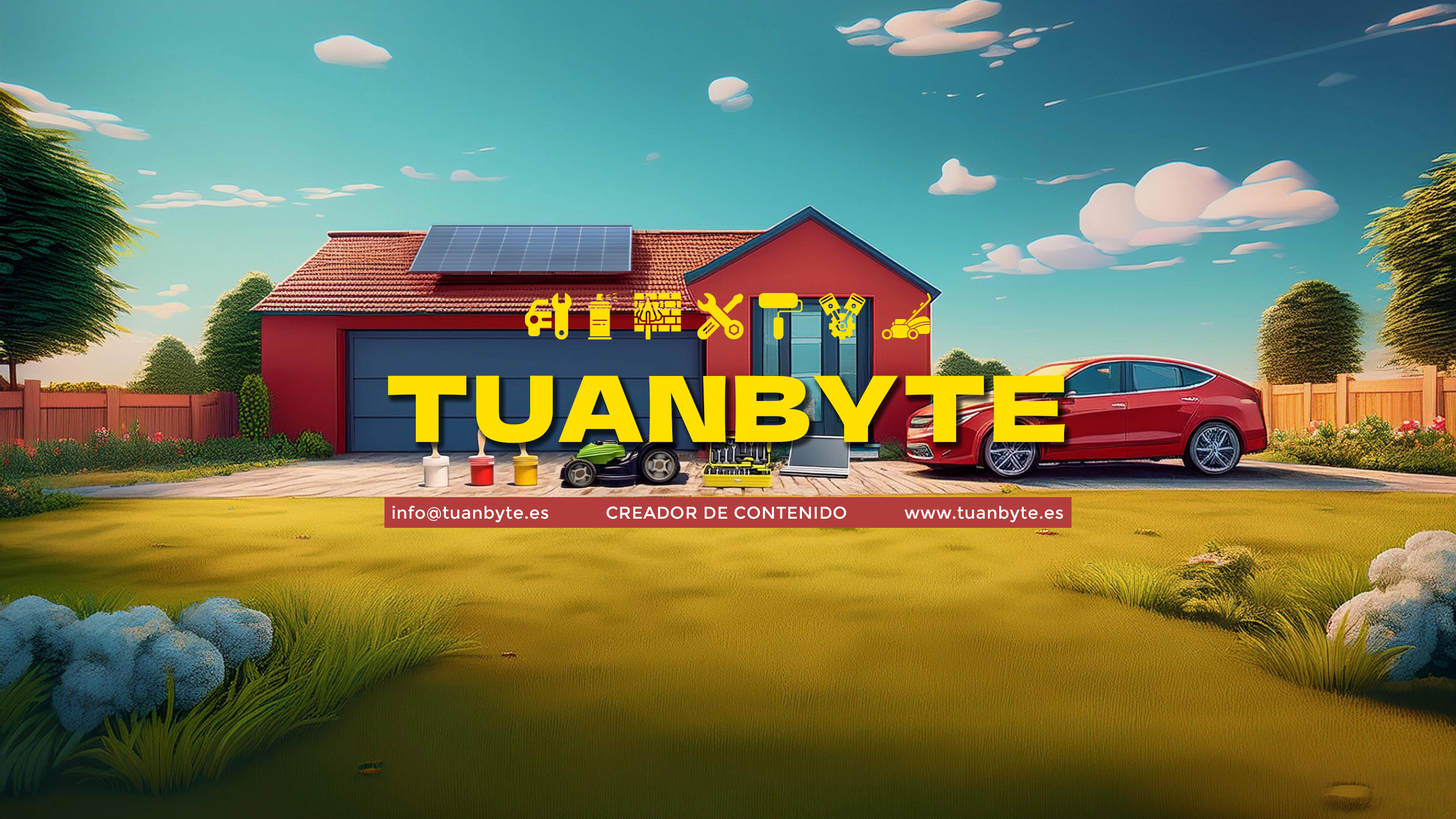
<style>
.page{position:relative;width:1456px;height:819px}
.page>*{position:absolute;margin:0}
.t1{font:91px "DelaGothicOne-Regular";letter-spacing:0.028em;color:#ffe000}
.t2{font:17.1px "Montserrat-Regular";letter-spacing:0.028em;color:#ffffff}
</style>
<div class="page">
<p class="t1" style="left:388px;top:375px;width:677px;height:68px">TUANBYTE</p>
<p class="t2" style="left:392px;top:506px;width:156px;height:17px">info@tuanbyte.es</p>
<p class="t2" style="left:606px;top:506px;width:240px;height:13px">CREADOR DE CONTENIDO</p>
<p class="t2" style="left:904px;top:506px;width:159px;height:17px">www.tuanbyte.es</p>
</div>
